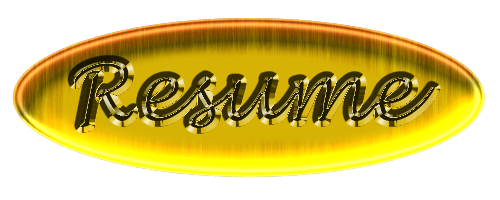
<style>
.page{position:relative;width:500px;height:200px;background:#ffffff}
.page>*{position:absolute;margin:0}
.t1{font:81.3px "LucidaHandwriting-Italic"}
</style>
<div class="page">
<p class="t1" style="left:73px;top:61px;width:362px;height:67px">Resume</p>
</div>
